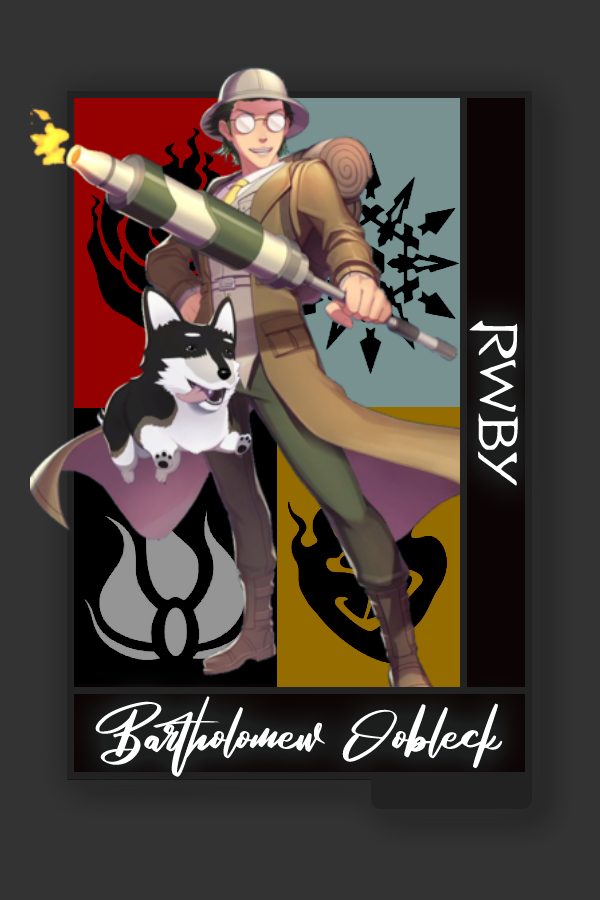
<style>
.page{position:relative;width:600px;height:900px;background:#333333}
.page>*{position:absolute;margin:0}
.t1{font:61.3px "RWBY_Style";color:#ffffff;scale:1.25 1}
.t2{font:76.6px "RosegaFREE";color:#ffffff;scale:0.91 1}
</style>
<div class="page">
<p class="t1" style="left:469px;top:320px;width:49px;height:166px;rotate:90deg">RWBY</p>
<p class="t2" style="left:93px;top:696px;width:410px;height:82px">Bartholomew Oobleck</p>
</div>
